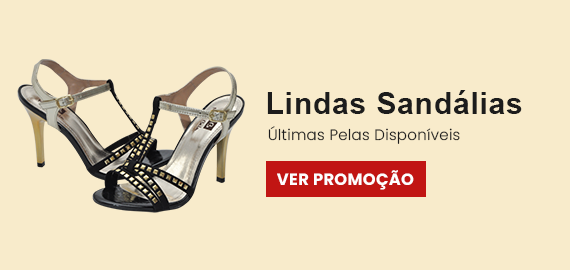
<style>
.page{position:relative;width:570px;height:270px;background:#f8ebcb}
.page>*{position:absolute;margin:0}
.t1{font:30.4px "Arial-BoldMT";letter-spacing:0.02em;color:#1c1c1c}
.t2{font:15px "Poppins-Light";letter-spacing:0.02em;color:#1c1c1c}
.t3{font:16.3px "Poppins-Bold";letter-spacing:0.02em;color:#fefefe}
</style>
<div class="page">
<p class="t1" style="left:267px;top:90px;width:255px;height:24px">Lindas Sandálias</p>
<p class="t2" style="left:268px;top:126px;width:192px;height:18px">Últimas Pelas Disponíveis</p>
<p class="t3" style="left:277px;top:170px;width:137px;height:20px">VER PROMOÇÃO</p>
</div>
